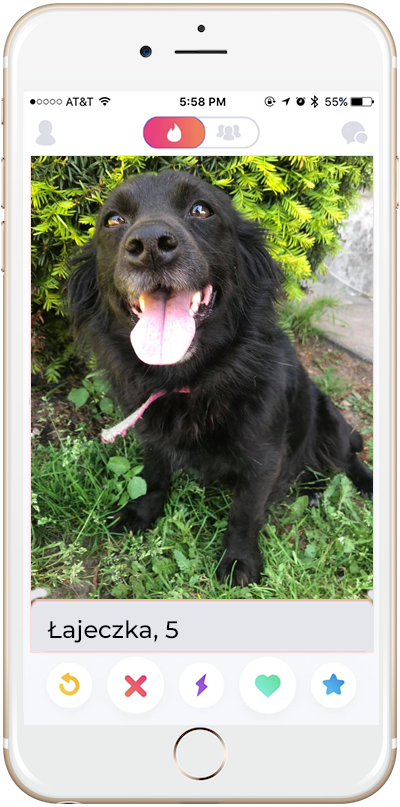
<style>
.page{position:relative;width:400px;height:807px}
.page>*{position:absolute;margin:0}
.t1{font:24px "Montserrat-Medium";color:#000000}
</style>
<div class="page">
<p class="t1" style="left:47px;top:620px;width:131px;height:23px">Łajeczka, 5</p>
</div>
